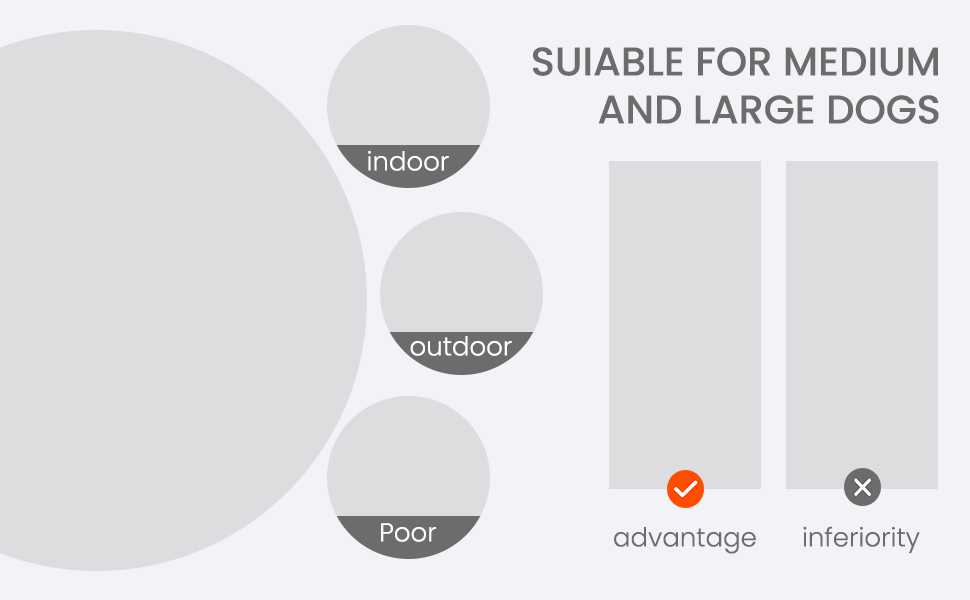
<style>
.page{position:relative;width:970px;height:600px;background:#dcdddf}
.page>*{position:absolute;margin:0}
.t1{font:40px "Poppins-Medium";color:#6c6c6c;text-transform:uppercase}
.t2{font:26px "Poppins-Light";color:#ffffff}
.t3{font:26px "Poppins-Light";color:#6c6c6c}
</style>
<div class="page">
<p class="t1" style="left:533px;top:47px;width:406px;height:77px;text-align:right">suiable FOR MEDIUM<br>AND LARGE DOGS</p>
<p class="t2" style="left:368px;top:150px;width:81px;height:21px">indoor</p>
<p class="t2" style="left:410px;top:336px;width:102px;height:20px">outdoor</p>
<p class="t2" style="left:381px;top:523px;width:55px;height:19px">Poor</p>
<p class="t3" style="left:614px;top:527px;width:142px;height:27px">advantage</p>
<p class="t3" style="left:803px;top:526px;width:117px;height:28px">inferiority</p>
</div>
